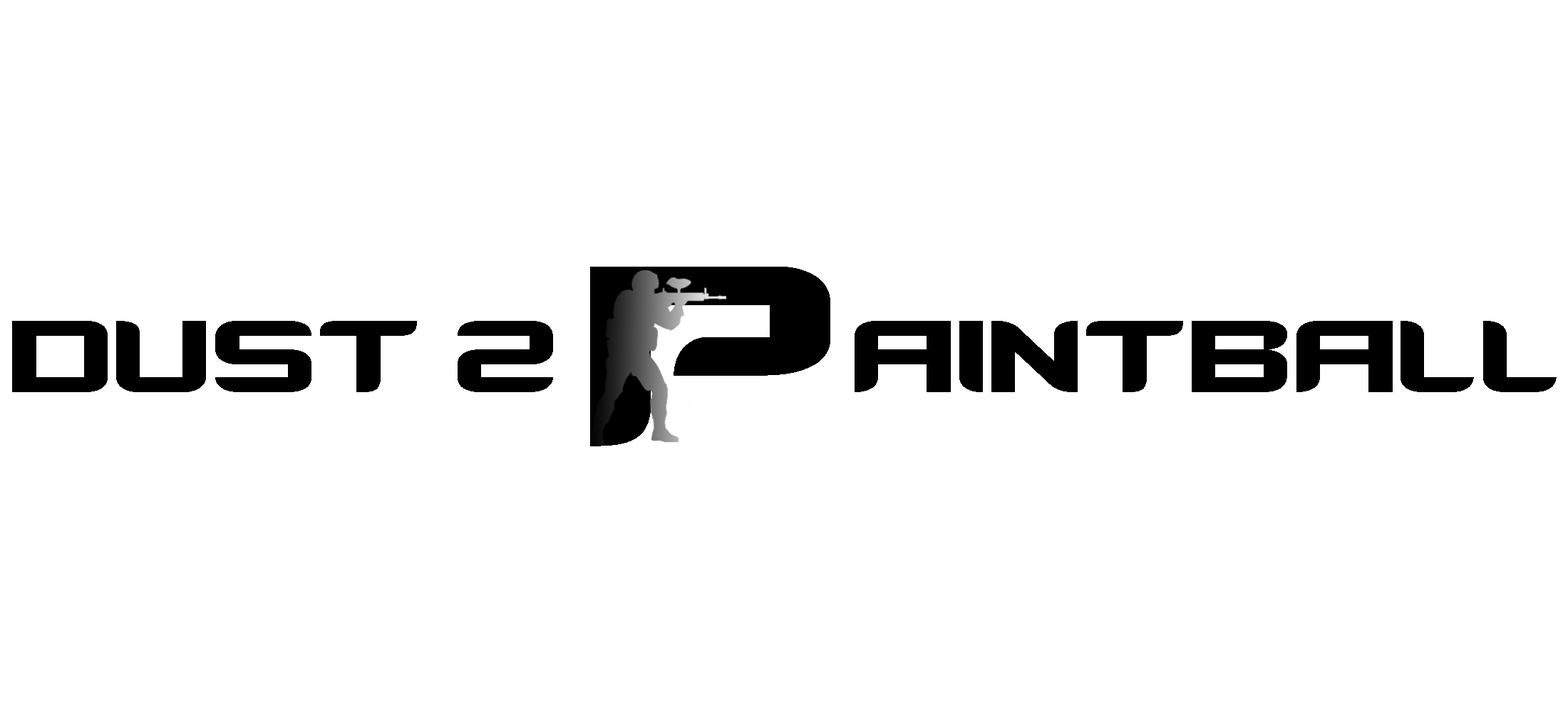
<style>
.page{position:relative;width:1568px;height:713px;background:#ffffff}
.page>*{position:absolute;margin:0}
.t1{font:356.4px "Counter-StrikeRegular";color:#000000}
.t2{font:142.5px "Counter-StrikeRegular";color:#000000}
</style>
<div class="page">
<p class="t1" style="left:590px;top:267px;width:240px;height:179px">P</p>
<p class="t2" style="left:12px;top:321px;width:1545px;height:71px">DUST 2     AINTBALL</p>
</div>
